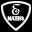
<style>
.page{position:relative;width:32px;height:32px;background:#000000}
.page>*{position:absolute;margin:0}
.t1{font:16.2px "FrenchScriptMT";color:#fefefe;scale:1.04 1}
.t2{font:5.8px "BritannicBold";color:#fefefe;scale:0.95 1}
</style>
<div class="page">
<p class="t1" style="left:11px;top:4px;width:10px;height:11px">E</p>
<p class="t2" style="left:7px;top:16px;width:17px;height:5px">MATHS</p>
</div>
